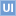
<style>
.page{position:relative;width:16px;height:16px;background:#709cd3}
.page>*{position:absolute;margin:0}
.t1{font:12px "MyriadPro-Bold";color:#ffffff}
</style>
<div class="page">
<p class="t1" style="left:3px;top:3px;width:10px;height:9px">UI</p>
</div>
